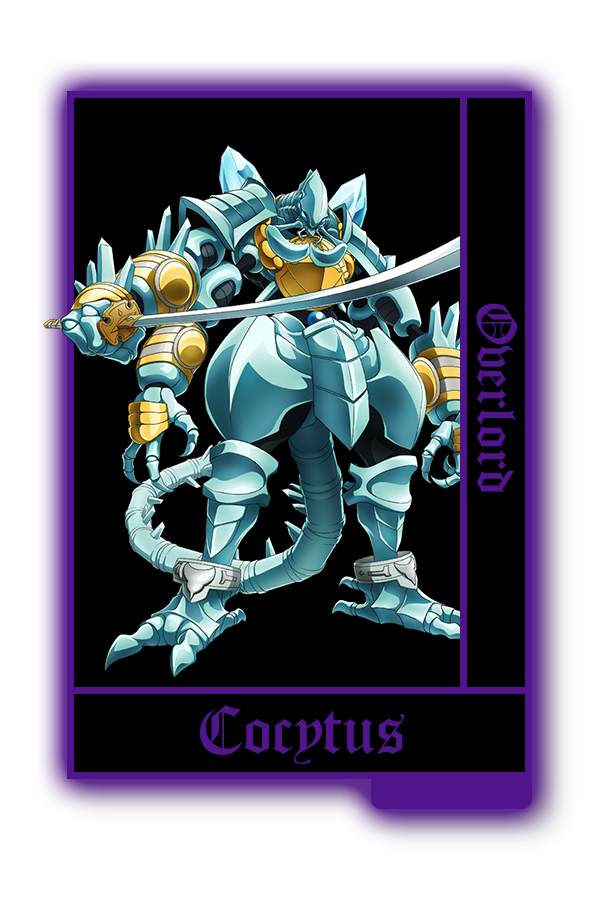
<style>
.page{position:relative;width:600px;height:900px;background:#000000}
.page>*{position:absolute;margin:0}
.t1{font:61.5px "OldLondon";color:#51158b}
.t2{font:75px "OldLondon";color:#51158b}
</style>
<div class="page">
<p class="t1" style="left:476px;top:303px;width:42px;height:189px;rotate:90deg">Overlord</p>
<p class="t2" style="left:200px;top:705px;width:205px;height:59px">Cocytus</p>
</div>
